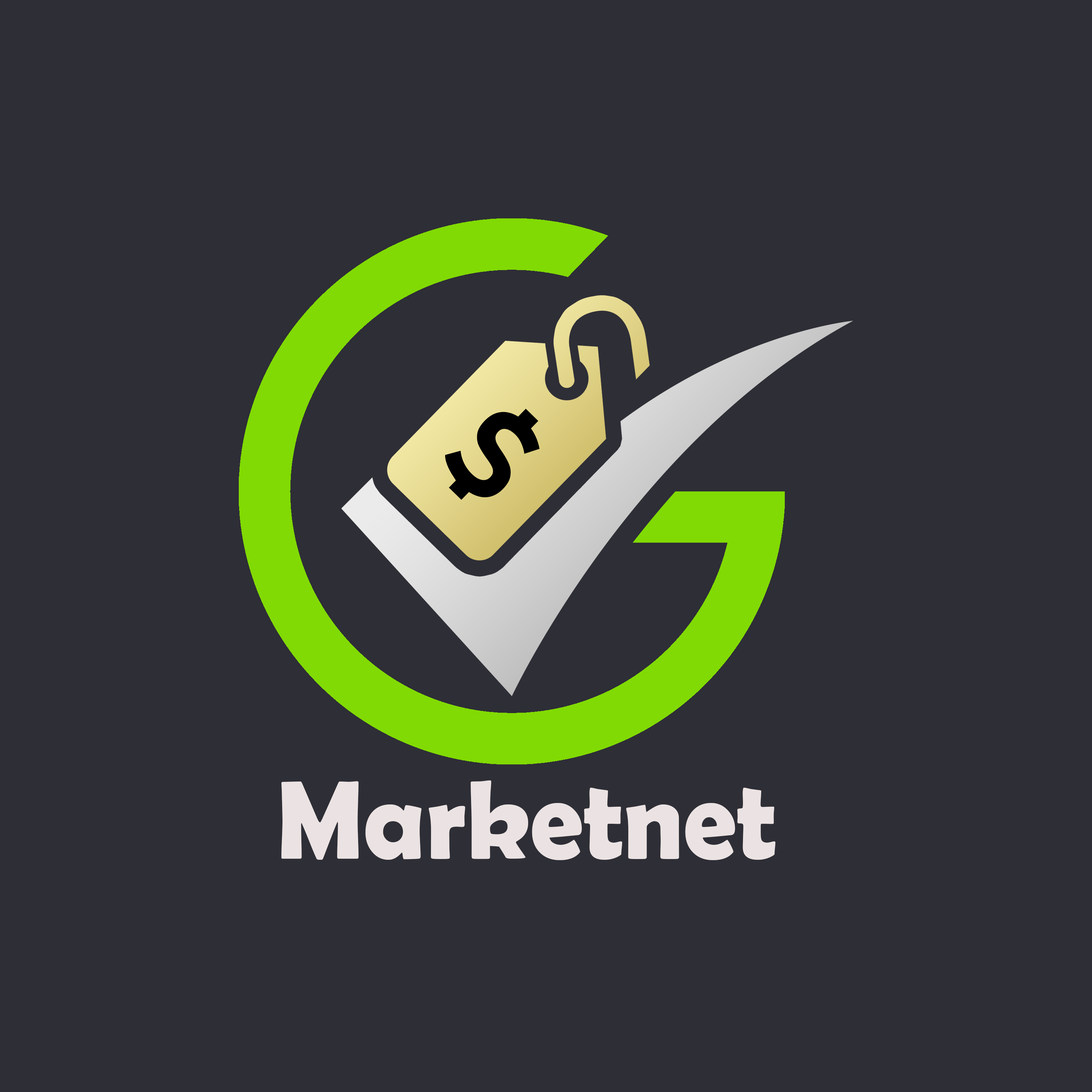
<style>
.page{position:relative;width:1092px;height:1092px;background:#2e2e36}
.page>*{position:absolute;margin:0}
.t1{font:124.8px "Bahnschrift-Bold";color:#000000;text-transform:uppercase;font-weight:bold;scale:1.05 1}
.t2{font:112px "BerlinSansFBDemi-Bold";color:#ebe3e3;scale:0.95 1}
</style>
<div class="page">
<p class="t1" style="left:445px;top:408px;width:95px;height:92px;rotate:44deg">$</p>
<p class="t2" style="left:281px;top:780px;width:495px;height:80px">Marketnet</p>
</div>
